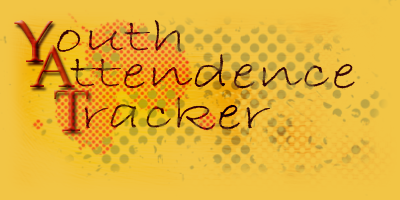
<style>
.page{position:relative;width:400px;height:200px}
.page>*{position:absolute;margin:0}
.t1{font:60px "BookAntiqua"}
.t2{font:48px "BradleyHandITC";scale:1.5 1}
.t3{font:48px "BradleyHandITC";color:#350608;scale:1.5 1}
</style>
<div class="page">
<p class="t1" style="left:14px;top:20px;width:39px;height:42px">Y</p>
<p class="t2" style="left:57px;top:20px;width:125px;height:32px">outh</p>
<p class="t1" style="left:30px;top:45px;width:45px;height:42px">A</p>
<p class="t3" style="left:70px;top:54px;width:285px;height:35px">ttendence</p>
<p class="t1" style="left:54px;top:90px;width:35px;height:41px">T</p>
<p class="t2" style="left:84px;top:97px;width:187px;height:33px">racker</p>
</div>
